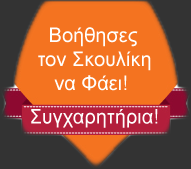
<style>
.page{position:relative;width:191px;height:169px;background:#f47320}
.page>*{position:absolute;margin:0}
.t1{font:20px "ArialMT";color:#fffffe}
</style>
<div class="page">
<p class="t1" style="left:38px;top:27px;width:113px;height:64px">Βοήθησες <br>τον Σκουλίκη <br>   να Φάει!</p>
<p class="t1" style="left:31px;top:109px;width:127px;height:19px">Συγχαρητήρια!</p>
</div>
